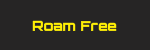
<style>
.page{position:relative;width:150px;height:50px;background:#262525}
.page>*{position:absolute;margin:0}
.t1{font:14px "Orbitron-Bold";color:#fff004}
</style>
<div class="page">
<p class="t1" style="left:32px;top:20px;width:85px;height:11px">Roam Free</p>
</div>
